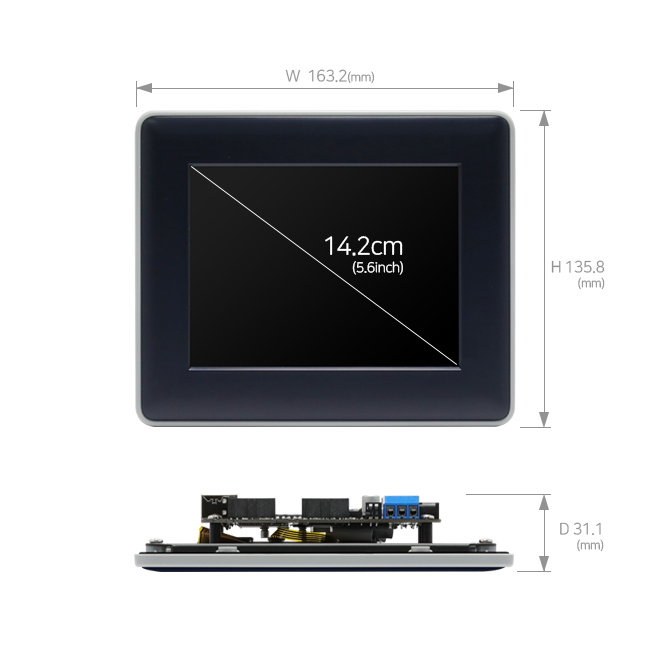
<style>
.page{position:relative;width:650px;height:650px;background:#ffffff}
.page>*{position:absolute;margin:0}
.t1{font:16px "NanumSquareR";letter-spacing:-0.03em;color:#939393}
.t2{font:12px "NanumSquareR";letter-spacing:-0.03em;color:#939393}
.t3{font:14px/18px "NanumSquareR";letter-spacing:-0.03em;color:#ffffff}
.t4{font:25px/18px "NanumSquareR";letter-spacing:-0.03em;color:#ffffff}
.t5{font:16px/15px "NanumSquareR";letter-spacing:-0.03em;color:#939393}
.t6{font:12px/15px "NanumSquareR";letter-spacing:-0.03em;color:#939393}
</style>
<div class="page">
<p class="t1" style="left:285px;top:69px;width:89px;height:15px">W  163.2<span class="t2">(mm)</span></p>
<p class="t3" style="left:325px;top:236px;width:78px;height:39px;text-align:right"><span class="t4">14.2cm<br></span>(5.6inch)</p>
<p class="t5" style="left:551px;top:260px;width:54px;height:30px;text-align:right">H 135.8<br><span class="t6">(mm)</span></p>
<p class="t5" style="left:560px;top:522px;width:44px;height:30px;text-align:right">D 31.1<br><span class="t6">(mm)</span></p>
</div>
